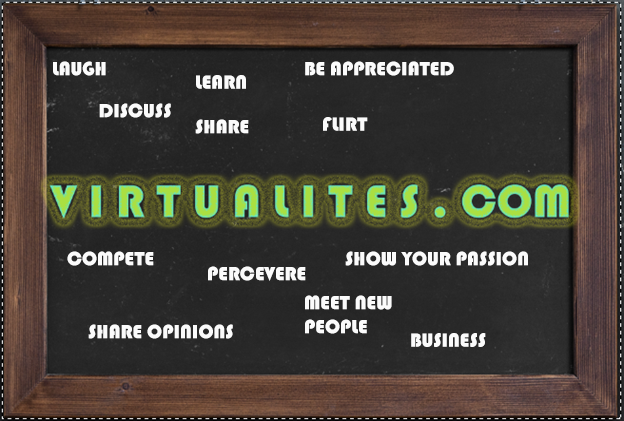
<style>
.page{position:relative;width:624px;height:421px}
.page>*{position:absolute;margin:0}
.t1{font:20px "Bauhaus93";color:#fbfbfb}
</style>
<div class="page">
<p class="t1" style="left:53px;top:61px;width:53px;height:15px">LAUGH</p>
<p class="t1" style="left:305px;top:61px;width:149px;height:15px">BE APPRECIATED</p>
<p class="t1" style="left:196px;top:75px;width:50px;height:14px">LEARN</p>
<p class="t1" style="left:99px;top:103px;width:72px;height:15px">DISCUSS</p>
<p class="t1" style="left:195px;top:119px;width:54px;height:15px">SHARE</p>
<p class="t1" style="left:323px;top:117px;width:45px;height:14px">FLIRT</p>
<p class="t1" style="left:67px;top:251px;width:87px;height:15px">COMPETE</p>
<p class="t1" style="left:345px;top:251px;width:183px;height:15px">SHOW YOUR PASSION</p>
<p class="t1" style="left:208px;top:266px;width:98px;height:15px">PERCEVERE</p>
<p class="t1" style="left:305px;top:295px;width:87px;height:39px">MEET NEW PEOPLE</p>
<p class="t1" style="left:88px;top:324px;width:145px;height:15px">SHARE OPINIONS</p>
<p class="t1" style="left:411px;top:333px;width:75px;height:14px">BUSINESS</p>
</div>
